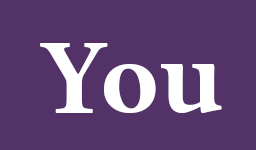
<style>
.page{position:relative;width:256px;height:150px;background:#533267}
.page>*{position:absolute;margin:0}
.t1{font:108.3px "LinLibertineB";color:#ffffff}
</style>
<div class="page">
<p class="t1" style="left:40px;top:43px;width:182px;height:70px">You</p>
</div>
